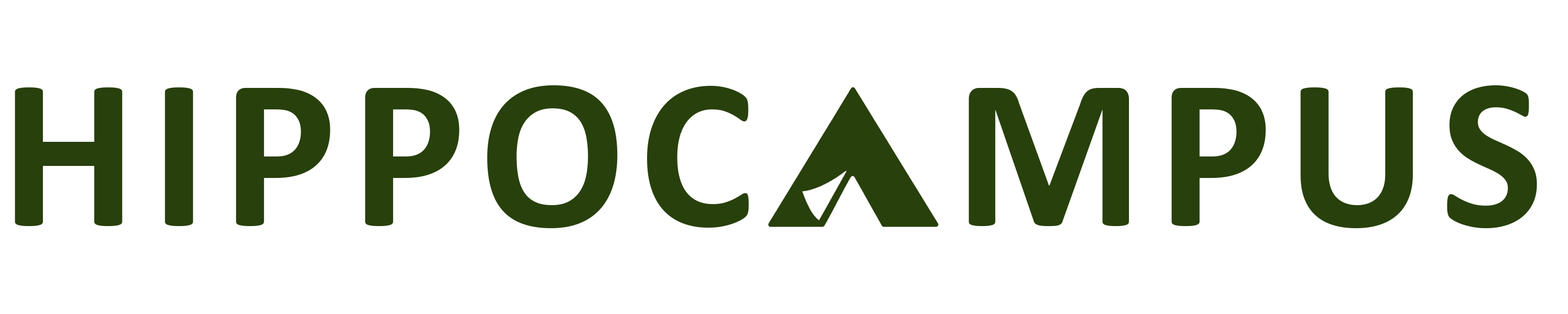
<style>
.page{position:relative;width:1568px;height:314px;background:#ffffff}
.page>*{position:absolute;margin:0}
.t1{font:217.5px "Calibri-Bold";letter-spacing:0.06em;color:#28400c}
</style>
<div class="page">
<p class="t1" style="left:15px;top:85px;width:1522px;height:143px">HIPPOC   MPUS</p>
</div>
